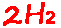
<style>
.page{position:relative;width:61px;height:28px;background:#ffffff}
.page>*{position:absolute;margin:0}
.t1{font:26px "SegoeScript";color:#ff0000;font-weight:bold}
.t2{font:18px "Shruti-Bold";color:#ff0000;font-weight:bold}
</style>
<div class="page">
<p class="t1" style="left:3px;top:2px;width:52px;height:24px">2H<span class="t2">2</span></p>
</div>
